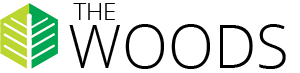
<style>
.page{position:relative;width:300px;height:73px;background:#ffffff}
.page>*{position:absolute;margin:0}
.t1{font:24px "OpenSans-Light";color:#000000}
.t2{font:60px "OpenSans-Light";color:#000000}
</style>
<div class="page">
<p class="t1" style="left:73px;top:3px;width:42px;height:17px">THE</p>
<p class="t2" style="left:69px;top:24px;width:217px;height:45px">WOODS</p>
</div>
